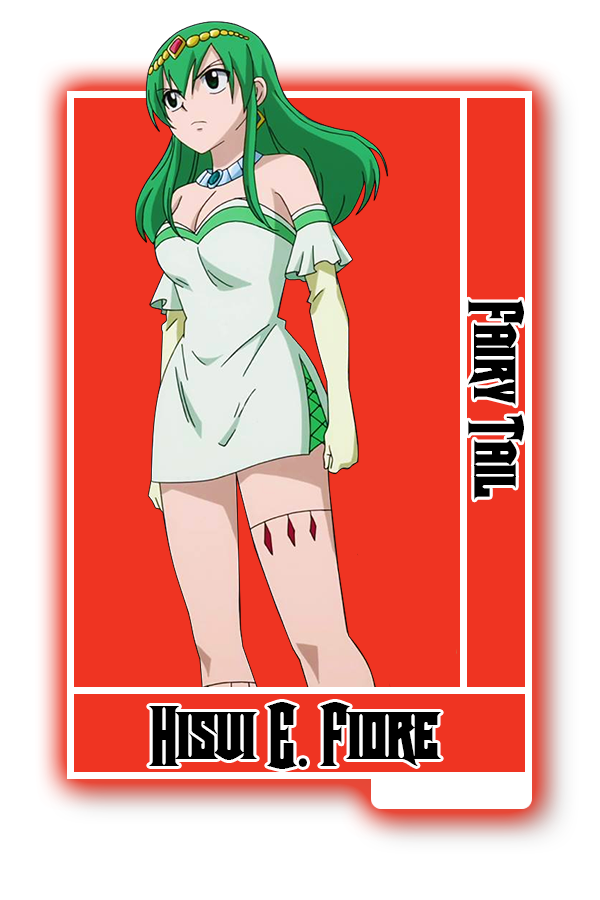
<style>
.page{position:relative;width:600px;height:900px;background:#ef3422}
.page>*{position:absolute;margin:0}
.t1{font:61.5px "Crown-Title";color:#000000}
.t2{font:70.1px "Crown-Title";color:#000000}
.t3{font:70.1px "MyriadPro-Regular";color:#000000}
</style>
<div class="page">
<p class="t1" style="left:468px;top:299px;width:56px;height:201px;rotate:90deg">Fairy Tail</p>
<p class="t2" style="left:149px;top:702px;width:292px;height:67px">Hisui E<span class="t3">.</span> Fiore</p>
</div>
